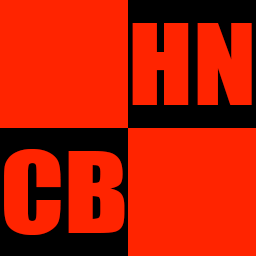
<style>
.page{position:relative;width:256px;height:256px;background:#ff2400}
.page>*{position:absolute;margin:0}
.t1{font:25.1px "Impact";color:#ff2400;scale:1.12 1}
.t2{font:25.1px "Impact";color:#ff2400;scale:1.11 1}
</style>
<div class="page">
<p class="t1" style="left:132px;top:23px;width:120px;height:82px">HN</p>
<p class="t2" style="left:4px;top:149px;width:121px;height:86px">CB</p>
</div>
